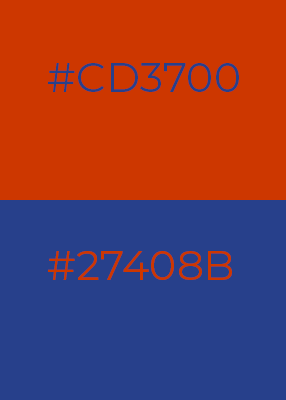
<style>
.page{position:relative;width:286px;height:400px;background:#cd3700}
.page>*{position:absolute;margin:0}
.t1{font:41.7px "Montserrat-Regular";color:#27408b}
.t2{font:41.7px "Montserrat-Regular";color:#cd3700}
</style>
<div class="page">
<p class="t1" style="left:48px;top:63px;width:191px;height:29px">#CD3700</p>
<p class="t2" style="left:48px;top:251px;width:184px;height:29px">#27408B</p>
</div>
